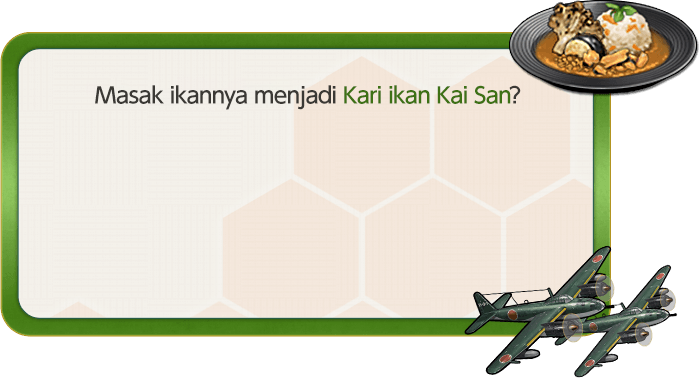
<style>
.page{position:relative;width:699px;height:378px;background:#ffffff}
.page>*{position:absolute;margin:0}
.t1{font:22px "UDShinGoPro-Medium";letter-spacing:-0.04em;color:#3b3935}
.t2{font:22px "UDShinGoPro-Medium";letter-spacing:-0.04em;color:#3e7115}
</style>
<div class="page">
<p class="t1" style="left:95px;top:85px;width:426px;height:25px">Masak ikannya menjadi <span class="t2">Kari ikan Kai San</span>?</p>
</div>
